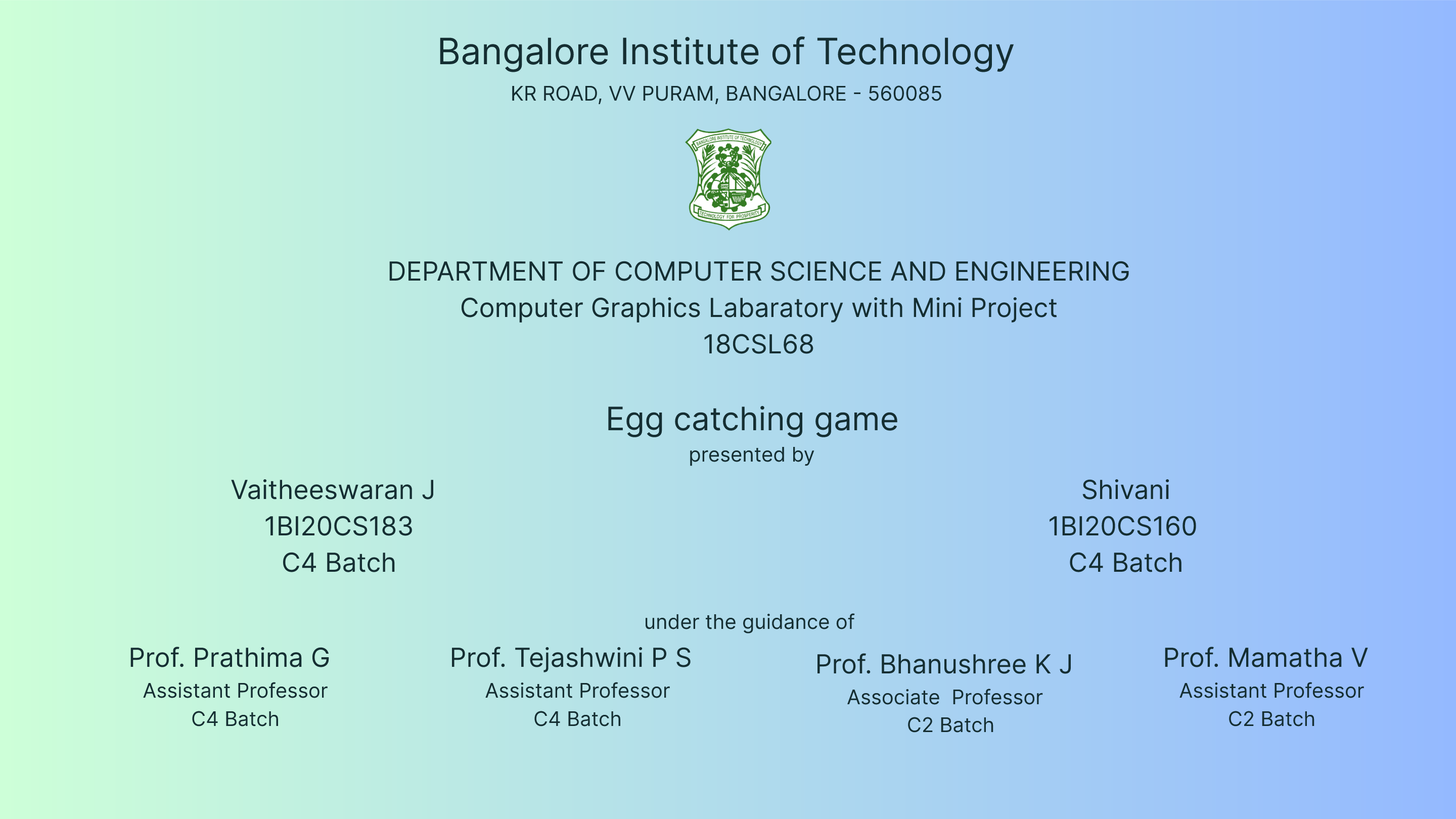
<style>
.page{position:relative;width:1456px;height:819px}
.page>*{position:absolute;margin:0}
.t1{font:36.4px "Inter-Regular";color:#152e32}
.t2{font:20.2px "Inter-Regular";color:#152e32}
.t3{font:26.3px/36.4px "Inter-Regular";color:#152e32}
.t4{font:26.3px "Inter-Regular";color:#152e32}
.t5{font:32.4px "Inter-Regular";color:#152e32}
.t6{font:20.2px/36.4px "Inter-Regular";color:#152e32}
.t7{font:20.2px/28.1px "Inter-Regular";color:#152e32}
</style>
<div class="page">
<p class="t1" style="left:440px;top:36px;width:574px;height:36px">Bangalore Institute of Technology</p>
<p class="t2" style="left:512px;top:85px;width:429px;height:20px">KR ROAD, VV PURAM, BANGALORE - 560085</p>
<p class="t3" style="left:389px;top:261px;width:740px;height:93px;text-align:center"><span class="t4">DEPARTMENT OF COMPUTER SCIENCE AND ENGINEERING</span><br>Computer Graphics Labaratory with Mini Project<br>18CSL68</p>
<p class="t5" style="left:608px;top:406px;width:289px;height:31px">Egg catching game</p>
<p class="t2" style="left:690px;top:446px;width:124px;height:20px">presented by</p>
<p class="t3" style="left:231px;top:479px;width:203px;height:93px">Vaitheeswaran J<br>1BI20CS183<br>C4 Batch</p>
<p class="t3" style="left:1050px;top:479px;width:146px;height:93px;text-align:center">Shivani<br>1BI20CS160<br>C4 Batch</p>
<p class="t2" style="left:645px;top:613px;width:210px;height:20px">under the guidance of</p>
<p class="t4" style="left:130px;top:647px;width:199px;height:20px">Prof. Prathima G</p>
<p class="t4" style="left:452px;top:647px;width:239px;height:25px">Prof. Tejashwini P S</p>
<p class="t4" style="left:817px;top:653px;width:254px;height:21px">Prof. Bhanushree K J</p>
<p class="t4" style="left:1165px;top:647px;width:203px;height:20px">Prof. Mamatha V</p>
<p class="t6" style="left:143px;top:682px;width:185px;height:44px;text-align:center">Assistant Professor<span class="t7"><br>C4 Batch</span></p>
<p class="t7" style="left:485px;top:682px;width:185px;height:44px;text-align:center">Assistant Professor<br>C4 Batch</p>
<p class="t7" style="left:847px;top:689px;width:196px;height:44px">Associate  Professor<br>C2 Batch</p>
<p class="t7" style="left:1179px;top:682px;width:185px;height:44px;text-align:center">Assistant Professor<br>C2 Batch</p>
</div>
